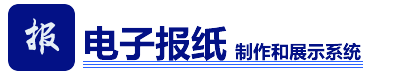
<style>
.page{position:relative;width:400px;height:76px;background:#ffffff}
.page>*{position:absolute;margin:0}
.t1{font:36px "MicrosoftYaHei-Bold";color:#020e72}
.t2{font:18px "MicrosoftYaHei-Bold";color:#020e72}
</style>
<div class="page">
<p class="t1" style="left:85px;top:25px;width:142px;height:36px">电子报纸</p>
<p class="t2" style="left:235px;top:42px;width:126px;height:19px">制作和展示系统</p>
</div>
